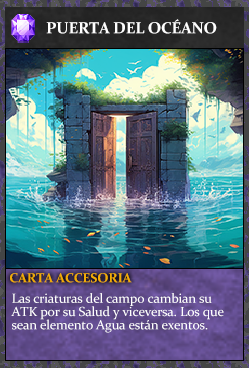
<style>
.page{position:relative;width:249px;height:368px}
.page>*{position:absolute;margin:0}
.t1{font:16px "Constantia-Bold";letter-spacing:-0.02em;color:#ffffff}
.t2{font:13.3px "Constantia-Bold";letter-spacing:-0.02em;color:#f2ac05}
.t3{font:13.3px/13.3px "Constantia";letter-spacing:-0.02em;color:#ffffff}
</style>
<div class="page">
<p class="t1" style="left:46px;top:19px;width:171px;height:15px">PUERTA DEL OCÉANO</p>
<p class="t2" style="left:10px;top:273px;width:122px;height:10px">CARTA ACCESORIA</p>
<p class="t3" style="left:11px;top:293px;width:213px;height:40px">Las criaturas del campo cambian su<br>ATK por su Salud y viceversa. Los que <br>sean elemento Agua están exentos.</p>
</div>
